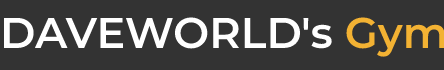
<style>
.page{position:relative;width:444px;height:70px;background:#333333}
.page>*{position:absolute;margin:0}
.t1{font:43px "Montserrat-SemiBold";color:#ffffff}
.t2{font:43px "Montserrat-SemiBold";color:#f3b233}
</style>
<div class="page">
<p class="t1" style="left:4px;top:17px;width:441px;height:40px">DAVEWORLD's <span class="t2">Gym</span></p>
</div>
